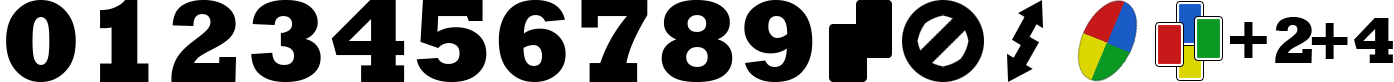
<style>
.page{position:relative;width:1394px;height:82px;background:#ffffff}
.page>*{position:absolute;margin:0}
.t1{font:119px "Rockwell-ExtraBold";color:#000000}
.t2{font:119.9px "Rockwell-ExtraBold";color:#000000}
.t3{font:118.1px "Rockwell-ExtraBold";color:#000000}
.t4{font:121.7px "Rockwell-ExtraBold";color:#000000}
.t5{font:118.1px "Rockwell-ExtraBold";color:#010101}
.t6{font:66.7px "Rockwell-ExtraBold";color:#000000}
.t7{font:64.6px "Rockwell-ExtraBold";color:#000000}
</style>
<div class="page">
<p class="t1" style="left:6px;top:0px;width:70px;height:82px">0</p>
<p class="t1" style="left:100px;top:0px;width:49px;height:82px">1</p>
<p class="t1" style="left:171px;top:0px;width:66px;height:82px">2</p>
<p class="t1" style="left:251px;top:0px;width:70px;height:82px">3</p>
<p class="t1" style="left:331px;top:0px;width:74px;height:82px">4</p>
<p class="t2" style="left:416px;top:0px;width:71px;height:82px">5</p>
<p class="t3" style="left:498px;top:0px;width:68px;height:82px">6</p>
<p class="t4" style="left:581px;top:0px;width:67px;height:82px">7</p>
<p class="t1" style="left:661px;top:0px;width:72px;height:82px">8</p>
<p class="t5" style="left:744px;top:0px;width:69px;height:82px">9</p>
<p class="t6" style="left:1230px;top:17px;width:82px;height:46px">+2</p>
<p class="t7" style="left:1311px;top:18px;width:82px;height:45px">+4</p>
</div>
